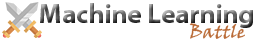
<style>
.page{position:relative;width:256px;height:40px;background:#ffffff}
.page>*{position:absolute;margin:0}
.t1{font:27px "MyriadHebrew-Bold"}
.t2{font:18px "VinerHandITC";color:#ba6b37}
</style>
<div class="page">
<p class="t1" style="left:40px;top:3px;width:213px;height:25px">Machine Learning</p>
<p class="t2" style="left:189px;top:23px;width:56px;height:16px">Battle</p>
</div>
